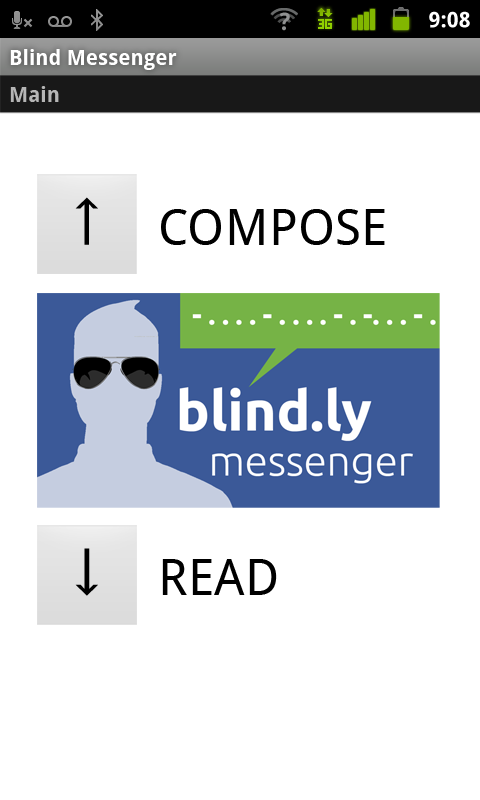
<style>
.page{position:relative;width:480px;height:800px;background:#ffffff}
.page>*{position:absolute;margin:0}
.t1{font:21.5px "DroidSans-Bold";letter-spacing:0.005em;color:#ffffff}
.t2{font:21px "DroidSans-Bold";color:#ffffff}
.t3{font:21px "DroidSans-Bold";color:#b5b5b5}
.t4{font:69.6px "SegoeUISymbol";color:#000000}
.t5{font:72px "DroidSans";color:#000000;font-variant:small-caps}
.t6{font:69.4px "SegoeUISymbol";color:#000000}
</style>
<div class="page">
<p class="t1" style="left:429px;top:11px;width:41px;height:17px">9:08</p>
<p class="t2" style="left:10px;top:49px;width:167px;height:21px">Blind Messenger</p>
<p class="t3" style="left:10px;top:86px;width:49px;height:16px">Main</p>
<p class="t4" style="left:75px;top:197px;width:23px;height:48px">↑</p>
<p class="t5" style="left:161px;top:209px;width:224px;height:36px">compose</p>
<p class="t6" style="left:75px;top:548px;width:23px;height:48px">↓</p>
<p class="t5" style="left:162px;top:559px;width:115px;height:36px">read</p>
</div>
